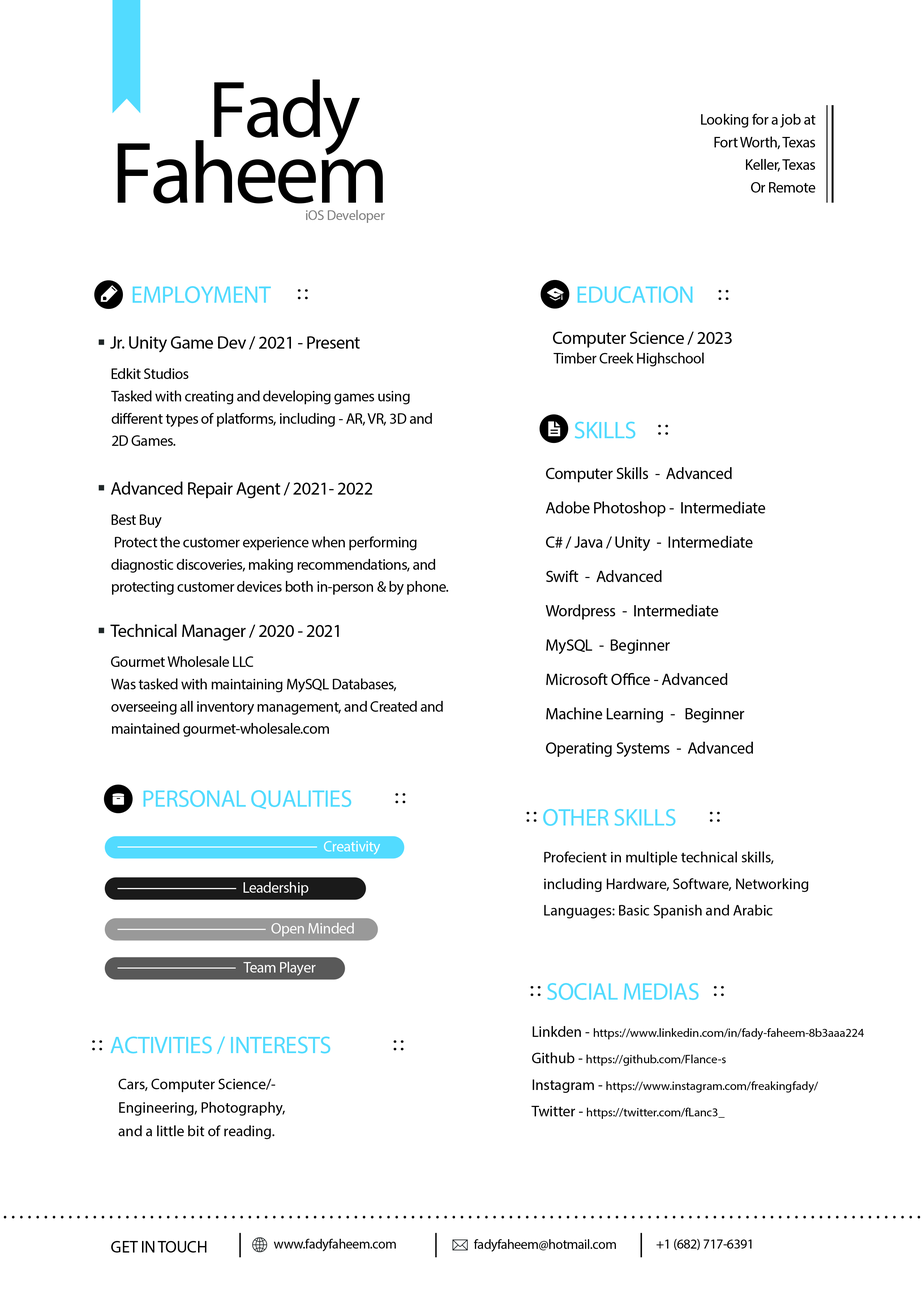
<style>
.page{position:relative;width:922px;height:1293px;background:#ffffff}
.page>*{position:absolute;margin:0}
.t1{font:80.7px "Raleway-ExtraBold";letter-spacing:-0.04em;color:#000000}
.t2{font:15.1px/22.6px "Raleway-Bold";letter-spacing:-0.02em;color:#000000}
.t3{font:15.1px/22.6px "Raleway-Regular";letter-spacing:-0.02em;color:#000000}
.t4{font:87.9px "Raleway-Thin";letter-spacing:-0.04em;color:#000000}
.t5{font:14px "Raleway-Bold";letter-spacing:-0.02em;color:#808080}
.t6{font:24.1px "Raleway-ExtraBold";letter-spacing:-0.02em;color:#52dbff}
.t7{font:18.1px "Raleway-Bold";letter-spacing:-0.02em;color:#000000}
.t8{font:15.1px "Raleway-Regular";letter-spacing:-0.02em;color:#000000}
.t9{font:15.1px "Raleway-Bold";letter-spacing:-0.02em;color:#000000}
.t10{font:15.1px/22.3px "Raleway-Regular";letter-spacing:-0.02em;color:#000000}
.t11{font:16.6px/34.3px "Raleway-Light";letter-spacing:-0.02em;color:#000000}
.t12{font:16.6px/34.3px "Raleway-SemiBold";letter-spacing:-0.02em;color:#000000}
.t13{font:15.1px "Raleway-Bold";letter-spacing:-0.02em;color:#ffffff}
.t14{font:15.1px/26.5px "Raleway-Regular";color:#000000}
.t15{font:12px/26.5px "Raleway-Regular";color:#000000}
.t16{font:15.1px/23.5px "Raleway-Regular";color:#000000}
.t17{font:16.8px "Raleway-ExtraBold";letter-spacing:-0.02em;color:#000000;text-transform:uppercase}
.t18{font:13.6px "Raleway-SemiBold";letter-spacing:-0.02em;color:#000000}
</style>
<div class="page">
<p class="t1" style="left:214px;top:80px;width:146px;height:75px">Fady</p>
<p class="t2" style="left:701px;top:114px;width:114px;height:79px;text-align:right"><span class="t3">Looking for a job at<br></span>Fort Worth, Texas<br>Keller, Texas<br>Or Remote</p>
<p class="t4" style="left:117px;top:140px;width:266px;height:63px">Faheem</p>
<p class="t5" style="left:306px;top:210px;width:79px;height:13px">iOS Developer</p>
<p class="t6" style="left:133px;top:286px;width:138px;height:17px">EMPLOYMENT</p>
<p class="t6" style="left:578px;top:286px;width:114px;height:17px">EDUCATION</p>
<p class="t7" style="left:110px;top:336px;width:250px;height:17px">Jr. Unity Game Dev / 2021 - Present</p>
<p class="t7" style="left:553px;top:332px;width:179px;height:16px">Computer Science / 2023</p>
<p class="t8" style="left:553px;top:353px;width:151px;height:13px">Timber Creek Highschool</p>
<p class="t9" style="left:112px;top:368px;width:76px;height:11px">Edkit Studios</p>
<p class="t10" style="left:111px;top:391px;width:321px;height:55px">Tasked with creating and developing games using different types of platforms, including - AR, VR, 3D and 2D Games.</p>
<p class="t6" style="left:575px;top:422px;width:60px;height:17px">SKILLS</p>
<p class="t11" style="left:546px;top:467px;width:219px;height:290px"><span class="t12">Computer Skills  -  </span>Advanced<br><span class="t12">Adobe Photoshop -  </span>Intermediate<br><span class="t12">C# / Java / Unity  -  </span>Intermediate<br><span class="t12">Swift  -  Advanced<br>Wordpress  -  </span>Intermediate<br>MySQL  -  Beginner<br>Microsoft Office - Advanced<br>Machine Learning  -   Beginner<br>Operating Systems  -  Advanced</p>
<p class="t7" style="left:111px;top:482px;width:261px;height:16px">Advanced Repair Agent / 2021- 2022</p>
<p class="t9" style="left:112px;top:515px;width:50px;height:13px">Best Buy</p>
<p class="t10" style="left:111px;top:537px;width:337px;height:58px">Protect the customer experience when performing diagnostic discoveries, making recommendations, and protecting customer devices both in-person &amp; by phone.</p>
<p class="t7" style="left:110px;top:624px;width:229px;height:17px">Technical Manager / 2020 - 2021</p>
<p class="t9" style="left:111px;top:656px;width:142px;height:11px">Gourmet Wholesale LLC</p>
<p class="t10" style="left:111px;top:679px;width:332px;height:58px">Was tasked with maintaining MySQL Databases, overseeing all inventory management, and Created and maintained gourmet-wholesale.com</p>
<p class="t6" style="left:143px;top:790px;width:208px;height:20px">PERSONAL QUALITIES</p>
<p class="t6" style="left:543px;top:809px;width:132px;height:17px">OTHER SKILLS</p>
<p class="t13" style="left:324px;top:841px;width:56px;height:14px">Creativity</p>
<p class="t14" style="left:544px;top:852px;width:264px;height:67px;text-align:justify">Profecient in multiple technical skills,<br>including Hardware, Software, Networking<br>Languages: Basic Spanish and Arabic</p>
<p class="t13" style="left:244px;top:882px;width:64px;height:14px">Leadership</p>
<p class="t13" style="left:271px;top:923px;width:83px;height:14px">Open Minded</p>
<p class="t13" style="left:243px;top:962px;width:72px;height:14px">Team Player</p>
<p class="t6" style="left:547px;top:983px;width:152px;height:17px">SOCIAL MEDIAS</p>
<p class="t6" style="left:110px;top:1037px;width:220px;height:18px">ACTIVITIES / INTERESTS</p>
<p class="t15" style="left:531px;top:1026px;width:333px;height:93px;text-align:justify"><span class="t14">Linkden - </span>https://www.linkedin.com/in/fady-faheem-8b3aaa224<br><span class="t14">Github - </span>https://github.com/Flance-s<br><span class="t14">Instagram - </span>https://www.instagram.com/freakingfady/<br><span class="t14">Twitter - </span>https://twitter.com/fLanc3_</p>
<p class="t16" style="left:119px;top:1079px;width:166px;height:60px">Cars, Computer Science/-<br>Engineering, Photography, <br>and a little bit of reading.</p>
<p class="t17" style="left:111px;top:1241px;width:95px;height:12px">Get In Touch</p>
<p class="t18" style="left:274px;top:1239px;width:122px;height:13px">www.fadyfaheem.com</p>
<p class="t18" style="left:474px;top:1240px;width:142px;height:12px">fadyfaheem@hotmail.com</p>
<p class="t18" style="left:656px;top:1239px;width:95px;height:11px">+1 (682) 717-6391</p>
</div>
